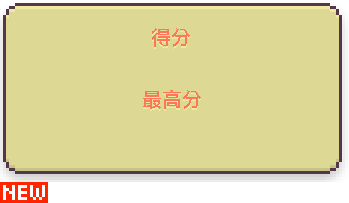
<style>
.page{position:relative;width:349px;height:203px;background:#ded895}
.page>*{position:absolute;margin:0}
.t1{font:20px "¬_?"}
.t2{font:20px "¬_?";color:#fc7858}
</style>
<div class="page">
<p class="t1" style="left:152px;top:30px;width:38px;height:19px">得分</p>
<p class="t2" style="left:152px;top:28px;width:38px;height:19px">得分</p>
<p class="t1" style="left:143px;top:92px;width:58px;height:19px">最高分</p>
<p class="t2" style="left:143px;top:90px;width:58px;height:19px">最高分</p>
</div>
